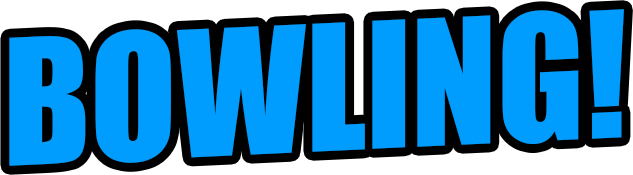
<style>
.page{position:relative;width:633px;height:175px;background:#009dff}
.page>*{position:absolute;margin:0}
.t1{font:161.7px "Impact";color:#009dff}
</style>
<div class="page">
<p class="t1" style="left:9px;top:9px;width:615px;height:157px;rotate:-3deg">BOWLING!</p>
</div>
